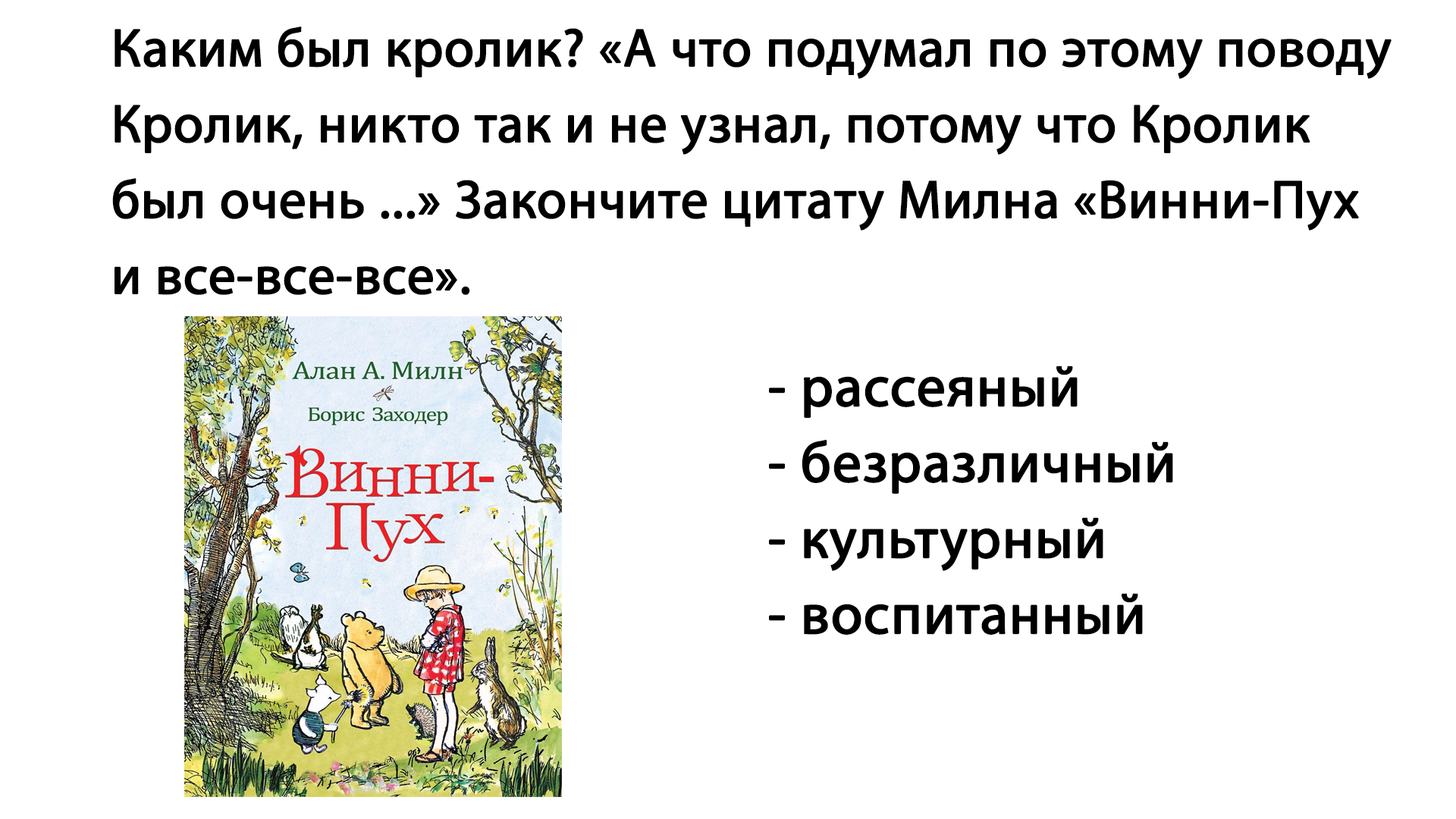
<style>
.page{position:relative;width:1456px;height:819px;background:#ffffff}
.page>*{position:absolute;margin:0}
.t1{font:53.7px/75.8px "MyriadPro-Regular";color:#000000;font-weight:bold}
.t2{font:56.9px/75.8px "MyriadPro-Regular";color:#000000;font-weight:bold}
</style>
<div class="page">
<p class="t1" style="left:112px;top:27px;width:1280px;height:268px">Каким был кролик? «А что подумал по этому поводу<br>Кролик, никто так и не узнал, потому что Кролик <br>был очень ...» Закончите цитату Милна «Винни-Пух<br>и все-все-все».</p>
<p class="t2" style="left:769px;top:366px;width:404px;height:269px">- рассеяный<br>- безразличный<br>- культурный<br>- воспитанный</p>
</div>
